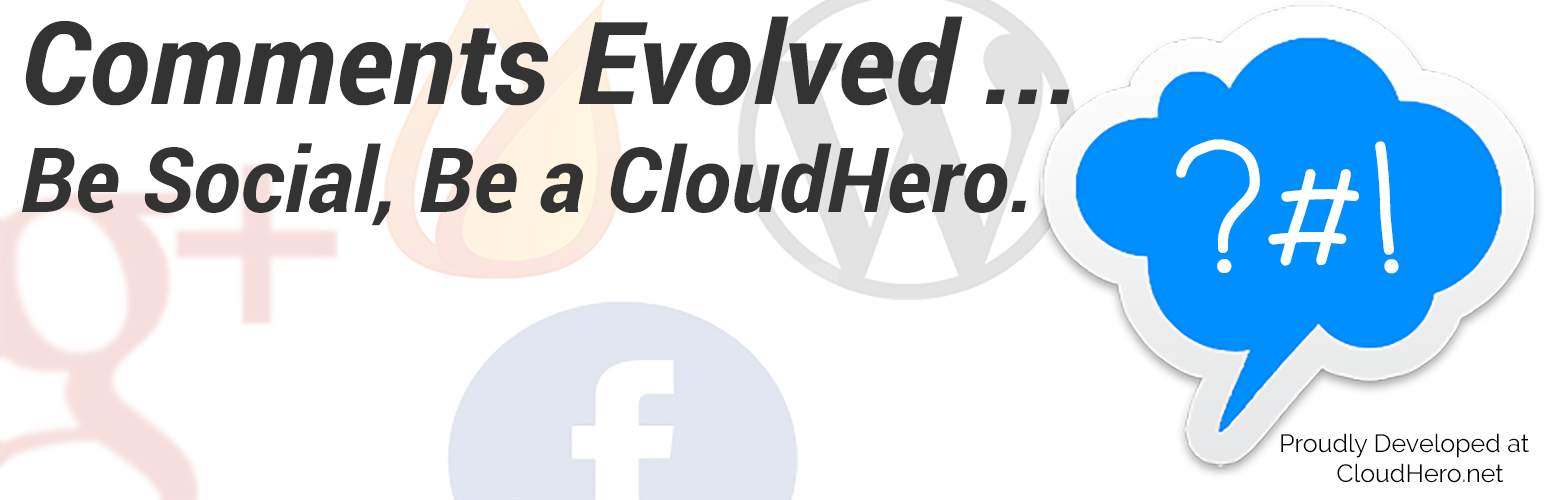
<style>
.page{position:relative;width:1544px;height:500px;background:#ffffff}
.page>*{position:absolute;margin:0}
.t1{font:90px "Roboto-BoldItalic";color:#333333}
.t2{font:115px "Roboto-BoldItalic";color:#333333}
.t3{font:180px "ComingSoon";color:#ffffff}
.t4{font:25px "Raleway";color:#000000}
</style>
<div class="page">
<p class="t1" style="left:21px;top:16px;width:1049px;height:210px"><span class="t2">Comments Evolved ... <br></span>Be Social, Be a CloudHero.</p>
<p class="t3" style="left:1176px;top:139px;width:223px;height:135px">?#!</p>
<p class="t4" style="left:1281px;top:433px;width:248px;height:50px;text-align:center">Proudly Developed at<br>     CloudHero.net</p>
</div>
